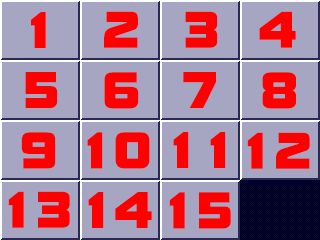
<style>
.page{position:relative;width:320px;height:240px;background:#a6a6c3}
.page>*{position:absolute;margin:0}
.t1{font:48px "BoltBoldITCbyBT-Regular";color:#ff0000}
</style>
<div class="page">
<p class="t1" style="left:31px;top:12px;width:15px;height:36px">1</p>
<p class="t1" style="left:104px;top:11px;width:34px;height:37px">2</p>
<p class="t1" style="left:185px;top:11px;width:33px;height:37px">3</p>
<p class="t1" style="left:259px;top:11px;width:37px;height:37px">4</p>
<p class="t1" style="left:25px;top:72px;width:33px;height:36px">5</p>
<p class="t1" style="left:104px;top:72px;width:35px;height:37px">6</p>
<p class="t1" style="left:183px;top:72px;width:33px;height:36px">7</p>
<p class="t1" style="left:262px;top:72px;width:34px;height:37px">8</p>
<p class="t1" style="left:21px;top:132px;width:35px;height:37px">9</p>
<p class="t1" style="left:87px;top:132px;width:63px;height:37px">10</p>
<p class="t1" style="left:173px;top:132px;width:53px;height:36px">11</p>
<p class="t1" style="left:247px;top:132px;width:63px;height:37px">12</p>
<p class="t1" style="left:8px;top:191px;width:62px;height:37px">13</p>
<p class="t1" style="left:88px;top:192px;width:64px;height:36px">14</p>
<p class="t1" style="left:169px;top:192px;width:62px;height:37px">15</p>
</div>
